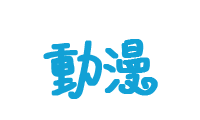
<style>
.page{position:relative;width:200px;height:120px;background:#ffffff}
.page>*{position:absolute;margin:0}
.t1{font:88px "MFDingDing_Noncommercial-Regular";color:#12a1d6;font-weight:bold}
</style>
<div class="page">
<p class="t1" style="left:43px;top:39px;width:115px;height:60px">动漫</p>
</div>
